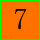
<style>
.page{position:relative;width:40px;height:40px;background:#ff7200}
.page>*{position:absolute;margin:0}
.t1{font:30px "SimSun";color:#000000}
</style>
<div class="page">
<p class="t1" style="left:15px;top:9px;width:12px;height:21px">7</p>
</div>
